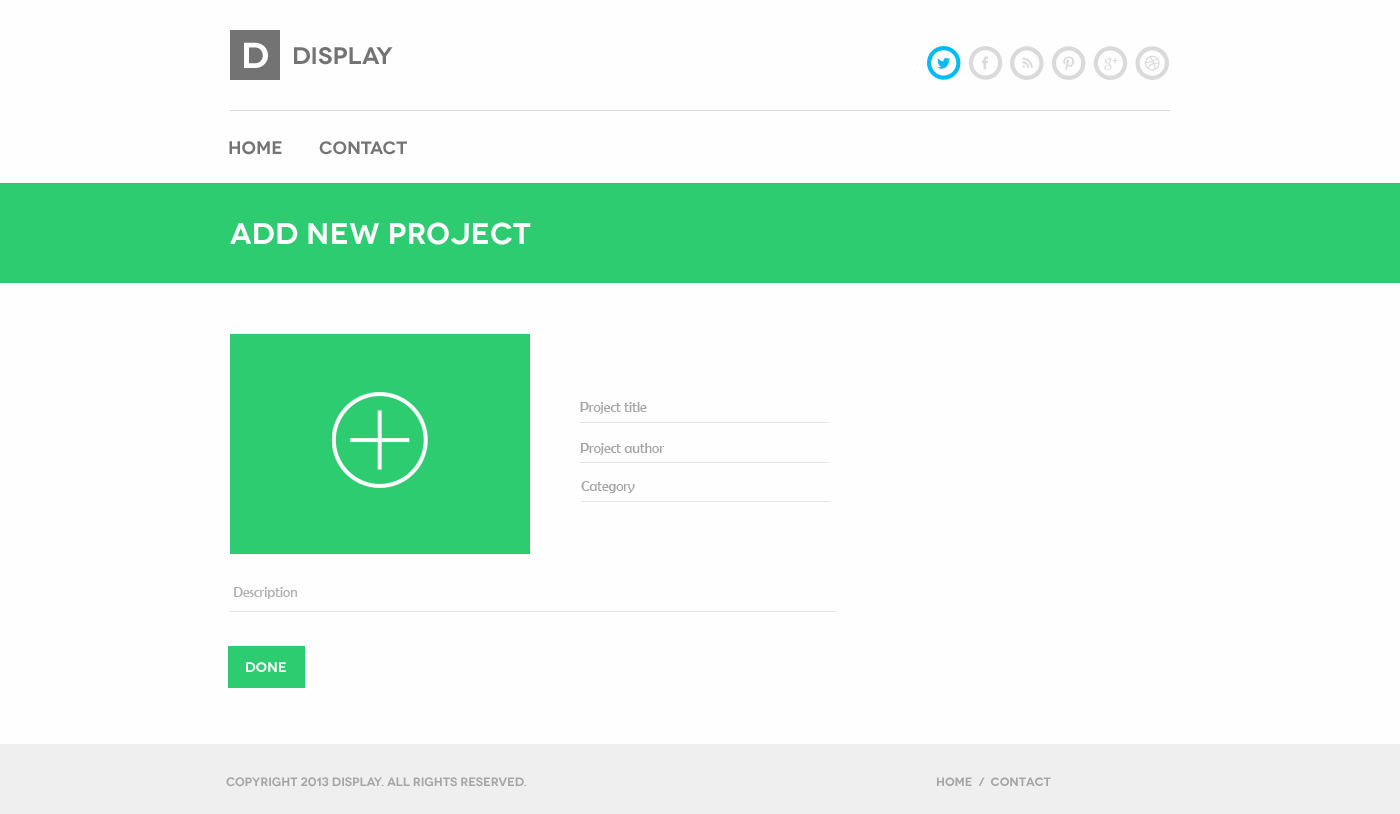
<style>
.page{position:relative;width:1400px;height:814px;background:#fefefe}
.page>*{position:absolute;margin:0}
.t1{font:36px "Novecentowide-DemiBold";color:#ffffff}
.t2{font:24px "Novecentowide-DemiBold";color:#737373}
.t3{font:18px "Novecentowide-DemiBold";color:#737373}
.t4{font:30px "Novecentowide-DemiBold";color:#ffffff}
.t5{font:14px "BerlinSansFB-Reg";color:#a5a5a5}
.t6{font:14px "BerlinSansFB-Reg";color:#afafaf}
.t7{font:14px "Novecentowide-DemiBold";color:#ffffff}
.t8{font:12px "Novecentowide-DemiBold";color:#a5a5a5;text-transform:uppercase}
</style>
<div class="page">
<p class="t1" style="left:244px;top:42px;width:24px;height:26px">D</p>
<p class="t2" style="left:294px;top:47px;width:99px;height:18px">Display</p>
<p class="t3" style="left:229px;top:141px;width:53px;height:14px">Home</p>
<p class="t3" style="left:319px;top:141px;width:88px;height:14px">Contact</p>
<p class="t4" style="left:230px;top:222px;width:301px;height:23px">Add new project</p>
<p class="t5" style="left:580px;top:402px;width:67px;height:12px">Project title</p>
<p class="t5" style="left:580px;top:443px;width:84px;height:12px">Project author</p>
<p class="t5" style="left:581px;top:481px;width:54px;height:13px">Category</p>
<p class="t6" style="left:234px;top:587px;width:63px;height:12px">Description</p>
<p class="t7" style="left:246px;top:662px;width:40px;height:10px">done</p>
<p class="t8" style="left:226px;top:777px;width:300px;height:10px">Copyright 2013 Display. All Rights Reserved.</p>
<p class="t8" style="left:937px;top:777px;width:114px;height:9px">Home  /  Contact</p>
</div>
